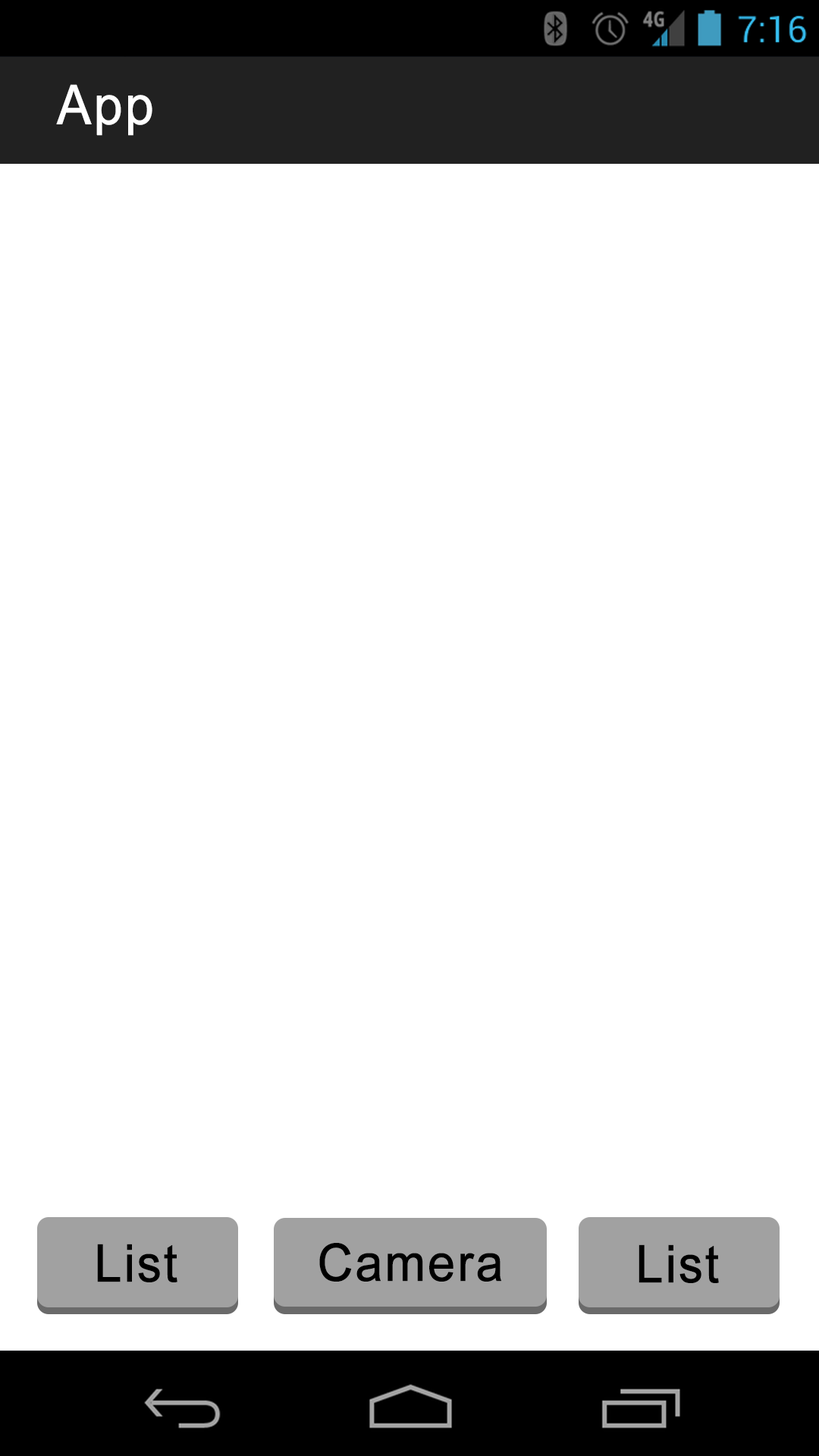
<style>
.page{position:relative;width:819px;height:1456px;background:#ffffff}
.page>*{position:absolute;margin:0}
.t1{font:54.5px "ArialMT";letter-spacing:0.02em;color:#ffffff;font-weight:bold;scale:0.95 1}
.t2{font:51.8px "ArialMT";letter-spacing:0.02em;color:#000000;font-weight:bold;scale:0.95 1}
</style>
<div class="page">
<p class="t1" style="left:56px;top:84px;width:96px;height:52px">App</p>
<p class="t2" style="left:97px;top:1244px;width:80px;height:38px">List</p>
<p class="t2" style="left:319px;top:1243px;width:183px;height:39px">Camera</p>
<p class="t2" style="left:639px;top:1244px;width:80px;height:39px">List</p>
</div>
